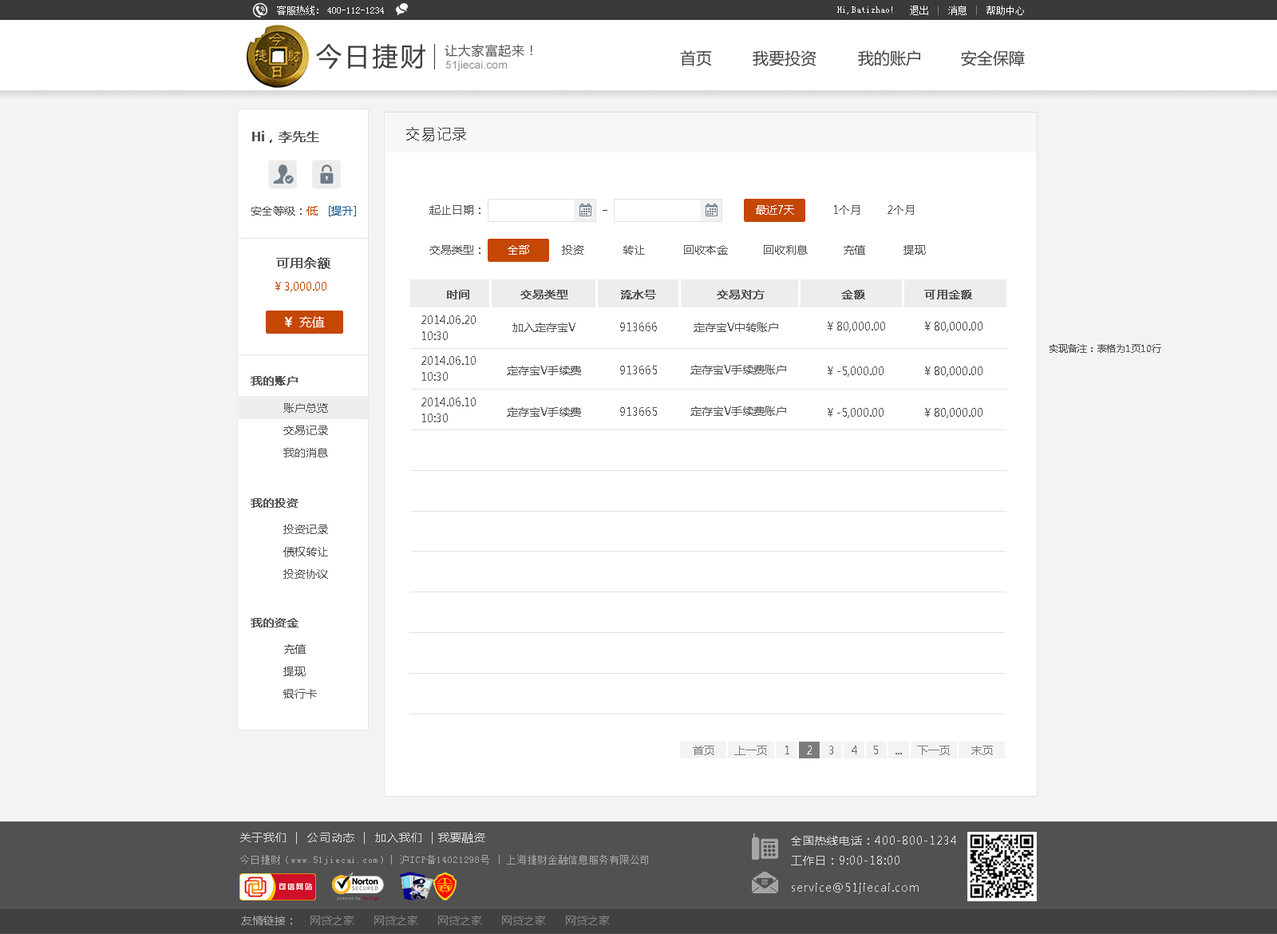
<style>
.page{position:relative;width:1277px;height:934px;background:#ffffff}
.page>*{position:absolute;margin:0}
.t1{font:9.6px "SimSun";color:#ffffff}
.t2{font:25.5px "MicrosoftYaHei";letter-spacing:0.1em;color:#3f3f3f}
.t3{font:12.8px "MicrosoftYaHei";letter-spacing:0.05em;color:#575757}
.t4{font:16px "MicrosoftYaHei";color:#414141}
.t5{font:11.2px "ArialMT";color:#969697}
.t6{font:12.8px "MicrosoftYaHei";color:#545454;font-weight:bold}
.t7{font:14.4px "MicrosoftYaHei";letter-spacing:0.1em;color:#3f3f3f}
.t8{font:11.2px "MicrosoftYaHei";color:#545454}
.t9{font:11.2px "MicrosoftYaHei";color:#c44704}
.t10{font:11.2px "MicrosoftYaHei";color:#175a94}
.t11{font:11.2px "MicrosoftYaHei";color:#ffffff}
.t12{font:11.2px "MicrosoftYaHei";color:#c44703}
.t13{font:11.2px "MicrosoftYaHei";color:#545454;font-weight:bold}
.t14{font:12.8px "MicrosoftYaHei";color:#ffffff}
.t15{font:12.8px "MicrosoftYaHei";color:#ffffff;font-weight:bold}
.t16{font:11.2px/16px "MicrosoftYaHei";color:#545454}
.t17{font:11.2px "MicrosoftYaHei";color:#4c4c4c}
.t18{font:9.6px "MicrosoftYaHei";color:#545454}
.t19{font:11.2px/22.3px "MicrosoftYaHei";color:#545454}
.t20{font:11.2px "MicrosoftYaHei";letter-spacing:0.07em;color:#dbdbdb}
.t21{font:11.2px "MicrosoftYaHei";letter-spacing:0.07em;color:#dadada}
.t22{font:9.6px "SimSun";letter-spacing:0.07em;color:#a7a7a7}
.t23{font:11.2px "MicrosoftYaHei";color:#858484}
.t24{font:11.2px "MicrosoftYaHei";color:#a7a7a7}
</style>
<div class="page">
<p class="t1" style="left:277px;top:6px;width:41px;height:9px">客服热线：</p>
<p class="t1" style="left:910px;top:6px;width:114px;height:9px">退出    消息    帮助中心</p>
<p class="t1" style="left:327px;top:7px;width:57px;height:7px">400-112-1234</p>
<p class="t1" style="left:837px;top:6px;width:55px;height:8px">Hi,Batizhao!</p>
<p class="t2" style="left:316px;top:44px;width:109px;height:25px">今日捷财</p>
<p class="t3" style="left:445px;top:44px;width:87px;height:13px">让大家富起来！</p>
<p class="t4" style="left:680px;top:50px;width:32px;height:16px">首页</p>
<p class="t4" style="left:753px;top:50px;width:63px;height:16px">我要投资</p>
<p class="t4" style="left:858px;top:50px;width:62px;height:16px">我的账户</p>
<p class="t4" style="left:961px;top:50px;width:64px;height:16px">安全保障</p>
<p class="t5" style="left:445px;top:61px;width:62px;height:10px">51jiecai.com</p>
<p class="t6" style="left:252px;top:131px;width:67px;height:12px">Hi，李先生</p>
<p class="t7" style="left:406px;top:127px;width:60px;height:14px">交易记录</p>
<p class="t8" style="left:251px;top:206px;width:105px;height:10px">安全等级：<span class="t9">低   </span><span class="t10">[提升]</span></p>
<p class="t8" style="left:429px;top:205px;width:51px;height:10px">起止日期：</p>
<p class="t11" style="left:756px;top:205px;width:38px;height:10px">最近7天</p>
<p class="t8" style="left:834px;top:205px;width:80px;height:10px">1个月        2个月</p>
<p class="t8" style="left:429px;top:245px;width:497px;height:10px">交易类型：       <span class="t11">全部</span>          投资            转让            回收本金           回收利息           充值            提现</p>
<p class="t6" style="left:276px;top:257px;width:54px;height:12px">可用余额</p>
<p class="t12" style="left:275px;top:282px;width:51px;height:10px">￥3,000.00</p>
<p class="t13" style="left:447px;top:290px;width:22px;height:9px">时间</p>
<p class="t13" style="left:520px;top:290px;width:48px;height:9px">交易类型</p>
<p class="t13" style="left:621px;top:290px;width:35px;height:9px">流水号</p>
<p class="t13" style="left:717px;top:290px;width:48px;height:9px">交易对方</p>
<p class="t13" style="left:841px;top:290px;width:24px;height:9px">金额</p>
<p class="t13" style="left:924px;top:290px;width:48px;height:9px">可用金额</p>
<p class="t14" style="left:284px;top:316px;width:41px;height:12px"><span class="t15">￥ </span>充值</p>
<p class="t16" style="left:421px;top:315px;width:55px;height:25px">2014.06.20<br>10:30</p>
<p class="t8" style="left:512px;top:322px;width:63px;height:10px">加入定存宝V</p>
<p class="t8" style="left:620px;top:322px;width:37px;height:9px">913666</p>
<p class="t8" style="left:694px;top:322px;width:84px;height:10px">定存宝V中转账户</p>
<p class="t8" style="left:828px;top:322px;width:57px;height:10px">￥80,000.00</p>
<p class="t17" style="left:925px;top:322px;width:57px;height:10px">￥80,000.00</p>
<p class="t18" style="left:1050px;top:344px;width:111px;height:9px">实现备注：表格为1页10行</p>
<p class="t16" style="left:421px;top:356px;width:55px;height:25px">2014.06.10<br>10:30</p>
<p class="t8" style="left:507px;top:366px;width:74px;height:9px">定存宝V手续费</p>
<p class="t8" style="left:620px;top:366px;width:37px;height:8px">913665</p>
<p class="t8" style="left:690px;top:365px;width:96px;height:9px">定存宝V手续费账户</p>
<p class="t13" style="left:251px;top:376px;width:47px;height:9px">我的账户</p>
<p class="t8" style="left:828px;top:366px;width:56px;height:11px">￥-5,000.00</p>
<p class="t17" style="left:925px;top:366px;width:57px;height:11px">￥80,000.00</p>
<p class="t16" style="left:421px;top:397px;width:55px;height:25px">2014.06.10<br>10:30</p>
<p class="t19" style="left:283px;top:403px;width:45px;height:54px">账户总览<br>交易记录<br>我的消息</p>
<p class="t8" style="left:507px;top:407px;width:74px;height:10px">定存宝V手续费</p>
<p class="t8" style="left:620px;top:407px;width:37px;height:9px">913665</p>
<p class="t8" style="left:690px;top:406px;width:96px;height:10px">定存宝V手续费账户</p>
<p class="t8" style="left:828px;top:408px;width:56px;height:10px">￥-5,000.00</p>
<p class="t17" style="left:925px;top:408px;width:57px;height:10px">￥80,000.00</p>
<p class="t13" style="left:251px;top:498px;width:47px;height:10px">我的投资</p>
<p class="t19" style="left:283px;top:524px;width:45px;height:55px">投资记录<br>债权转让<br>投资协议</p>
<p class="t13" style="left:251px;top:618px;width:47px;height:9px">我的资金</p>
<p class="t19" style="left:283px;top:644px;width:34px;height:54px">充值<br>提现<br>银行卡</p>
<p class="t20" style="left:240px;top:832px;width:245px;height:12px">关于我们  |  公司动态  |  加入我们  | 我要融资</p>
<p class="t21" style="left:791px;top:836px;width:165px;height:29px">全国热线电话：400-800-1234<br>工作日：9:00-18:00</p>
<p class="t22" style="left:240px;top:855px;width:408px;height:9px">今日捷财（www.51jiecai.com）| 沪ICP备14021298号 | 上海捷财金融信息服务有限公司</p>
<p class="t21" style="left:792px;top:883px;width:127px;height:11px">service@51jiecai.com</p>
<p class="t23" style="left:241px;top:915px;width:369px;height:10px"><span class="t24">友情链接：</span>    网贷之家      网贷之家      网贷之家      网贷之家      网贷之家</p>
</div>
